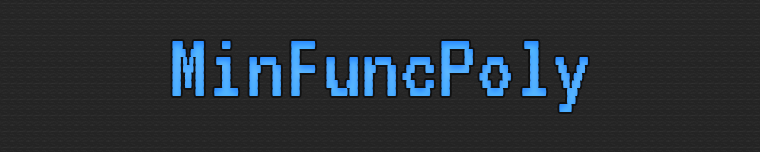
<style>
.page{position:relative;width:760px;height:152px;background:#252525}
.page>*{position:absolute;margin:0}
.t1{font:96px "VT323-Regular";color:#4babff}
</style>
<div class="page">
<p class="t1" style="left:172px;top:41px;width:416px;height:71px">MinFuncPoly</p>
</div>
